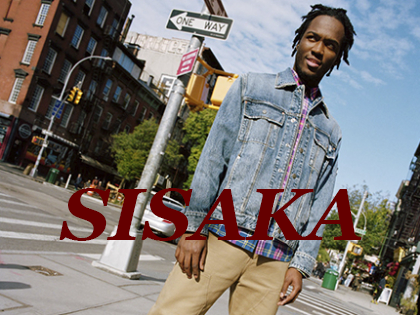
<style>
.page{position:relative;width:420px;height:315px}
.page>*{position:absolute;margin:0}
.t1{font:74px "Georgia-BoldItalic";color:#650000}
</style>
<div class="page">
<p class="t1" style="left:59px;top:188px;width:303px;height:53px">SISAKA</p>
</div>
